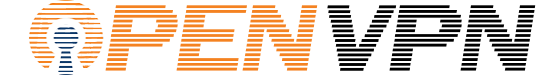
<style>
.page{position:relative;width:536px;height:75px;background:#ffffff}
.page>*{position:absolute;margin:0}
.t1{font:103px "LinearBeam05";color:#f48221}
.t2{font:103px "LinearBeam05";color:#cc9900}
.t3{font:103px "LinearBeam05";color:#000000}
</style>
<div class="page">
<p class="t1" style="left:105px;top:5px;width:431px;height:66px"><span class="t2">   </span>PEN<span class="t3">VPN</span></p>
</div>
